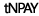
<style>
.page{position:relative;width:39px;height:16px;background:#ffffff}
.page>*{position:absolute;margin:0}
.t1{font:14px "MalgunGothicRegular";letter-spacing:-0.1em;color:#000000;font-weight:bold}
</style>
<div class="page">
<p class="t1" style="left:4px;top:2px;width:35px;height:12px">tNPAY</p>
</div>
